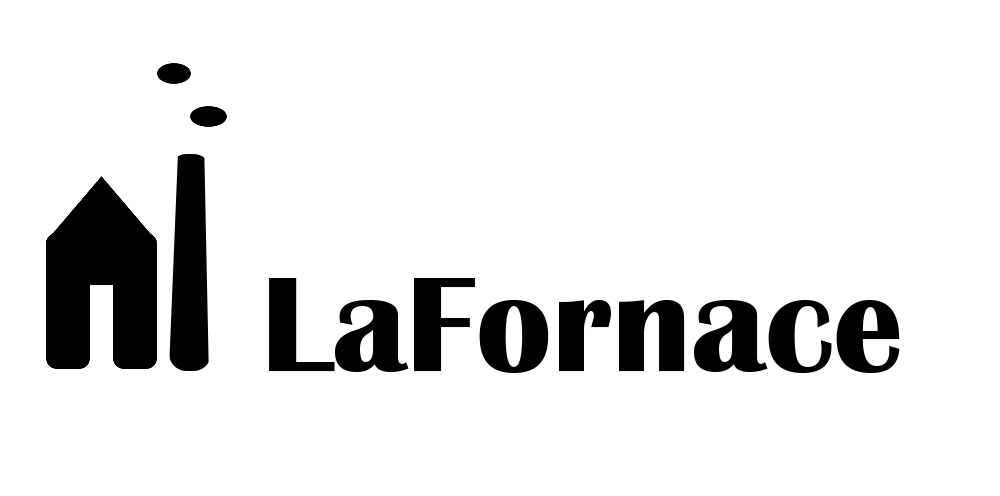
<style>
.page{position:relative;width:1000px;height:496px;background:#ffffff}
.page>*{position:absolute;margin:0}
.t1{font:140px "BritannicBold";color:#000000}
</style>
<div class="page">
<p class="t1" style="left:269px;top:278px;width:631px;height:95px">LaFornace</p>
</div>
